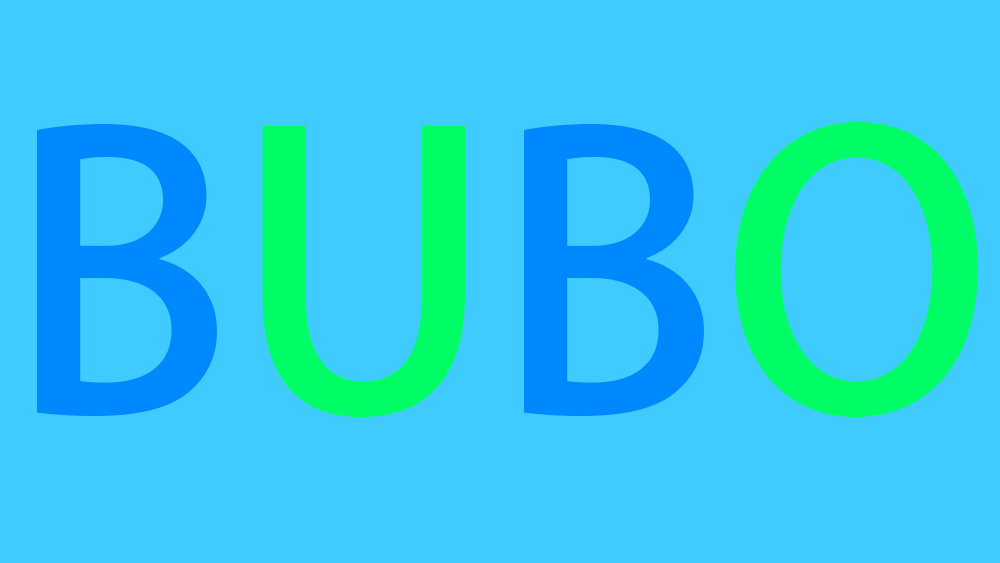
<style>
.page{position:relative;width:1000px;height:563px;background:#40cbff}
.page>*{position:absolute;margin:0}
.t1{font:375.3px "AdobeHeitiStd-Regular";color:#0089fd}
.t2{font:375.3px "AdobeHeitiStd-Regular";color:#00fd65}
</style>
<div class="page">
<p class="t1" style="left:37px;top:121px;width:941px;height:297px">B<span class="t2">U</span>B<span class="t2">O</span></p>
</div>
